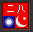
<style>
.page{position:relative;width:33px;height:32px;background:#f20000}
.page>*{position:absolute;margin:0}
.t1{font:10.4px "SimSun";color:#ffffff}
</style>
<div class="page">
<p class="t1" style="left:7px;top:5px;width:18px;height:8px">二八</p>
</div>
